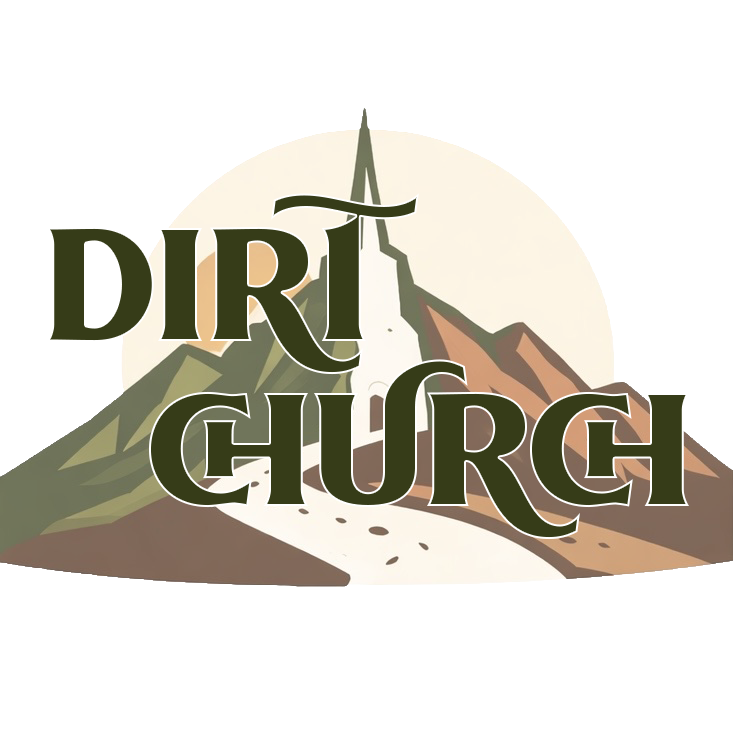
<style>
.page{position:relative;width:733px;height:733px;background:#ffffff}
.page>*{position:absolute;margin:0}
.t1{font:200px "Killarney";color:#363c18}
</style>
<div class="page">
<p class="t1" style="left:47px;top:193px;width:372px;height:182px">DIRT</p>
<p class="t1" style="left:149px;top:359px;width:540px;height:181px">CHURCH</p>
</div>
